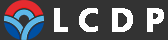
<style>
.page{position:relative;width:168px;height:40px;background:#333333}
.page>*{position:absolute;margin:0}
.t1{font:30px "MicrosoftYaHei-Bold";color:#ffffff;font-weight:bold}
</style>
<div class="page">
<p class="t1" style="left:54px;top:8px;width:110px;height:24px">L C D P</p>
</div>
